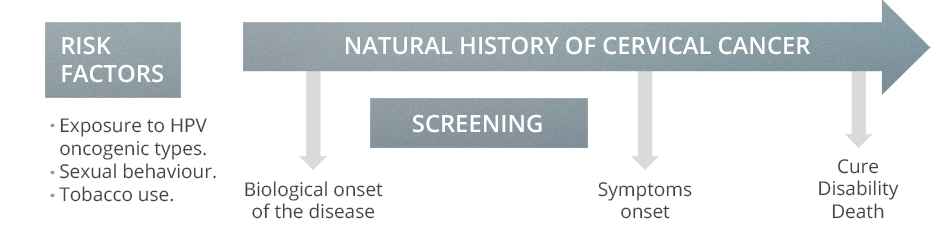
<style>
.page{position:relative;width:950px;height:231px;background:#ffffff}
.page>*{position:absolute;margin:0}
.t1{font:23.7px "OpenSans-Semibold";color:#ffffff}
.t2{font:19px "OpenSans-Extrabold";color:#999999}
.t3{font:19px "OpenSans";color:#454545}
</style>
<div class="page">
<p class="t1" style="left:62px;top:36px;width:101px;height:47px">RISK<br>FACTORS</p>
<p class="t1" style="left:346px;top:36px;width:465px;height:19px">NATURAL HISTORY OF CERVICAL CANCER</p>
<p class="t2" style="left:50px;top:123px;width:5px;height:5px">.</p>
<p class="t3" style="left:59px;top:118px;width:157px;height:84px">Exposure to HPV<br>oncogenic types.<br>Sexual behaviour.<br>Tobacco use.</p>
<p class="t1" style="left:413px;top:114px;width:129px;height:19px">SCREENING</p>
<p class="t3" style="left:819px;top:159px;width:80px;height:60px;text-align:center">Cure<br>Disability<br>Death</p>
<p class="t2" style="left:50px;top:170px;width:5px;height:5px">.</p>
<p class="t3" style="left:245px;top:181px;width:138px;height:38px;text-align:center">Biological onset<br>of the disease</p>
<p class="t3" style="left:598px;top:182px;width:94px;height:37px;text-align:center">Symptoms<br>onset</p>
<p class="t2" style="left:50px;top:193px;width:5px;height:5px">.</p>
</div>
